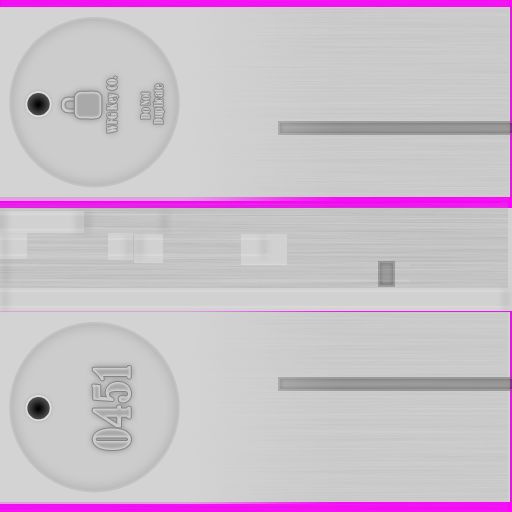
<style>
.page{position:relative;width:512px;height:512px}
.page>*{position:absolute;margin:0}
.t1{font:12px "BernardMT-Condensed";color:#cbcbcb}
.t2{font:11px "BernardMT-Condensed";color:#cbcbcb}
.t3{font:48px "BernardMT-Condensed";color:#bcbcbc}
</style>
<div class="page">
<p class="t1" style="left:107px;top:76px;width:12px;height:57px;rotate:-90deg">WFG Key CO.</p>
<p class="t2" style="left:140px;top:84px;width:25px;height:40px;text-align:center;rotate:-90deg">Do Not <br>Duplicate</p>
<p class="t3" style="left:92px;top:366px;width:39px;height:84px;rotate:-90deg">0451</p>
</div>
